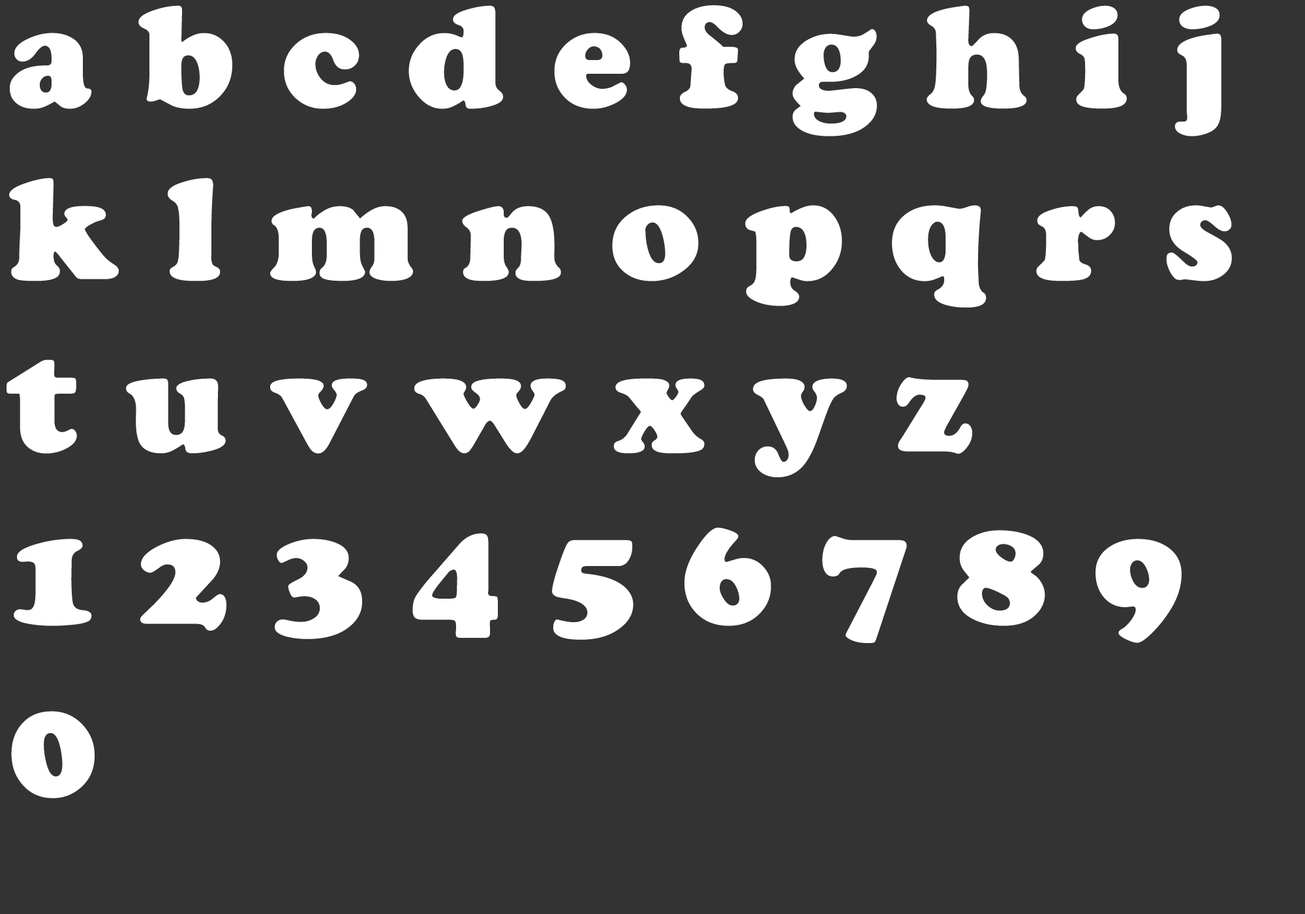
<style>
.page{position:relative;width:1305px;height:914px;background:#333333}
.page>*{position:absolute;margin:0}
.t1{font:143.6px "VNI-Cooper-Heavy";color:#ffffff}
</style>
<div class="page">
<p class="t1" style="left:7px;top:5px;width:1225px;height:793px">a b c d e f g h i j k l m n o p q r s t u v w x y z <br>1 2 3 4 5 6 7 8 9 0</p>
</div>
